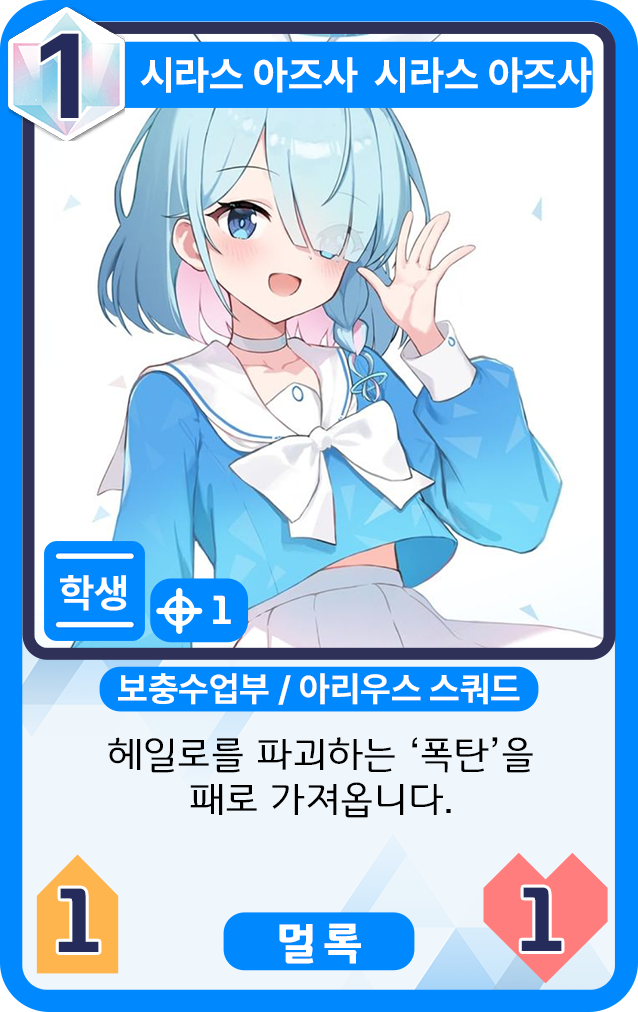
<style>
.page{position:relative;width:638px;height:1012px}
.page>*{position:absolute;margin:0}
.t1{font:119.3px "Pretendard-Bold";color:#252c5b}
.t2{font:39.8px "Pretendard-Bold";color:#ffffff}
.t3{font:39.8px "Pretendard-Bold";color:#fefefe}
.t4{font:39.8px "GyeonggiTitleVOTF";color:#fefefe}
.t5{font:34.8px "Pretendard-Bold";color:#ffffff}
.t6{font:39.8px/44.7px "GyeonggiTitleLOTF";color:#000000;scale:1.03 1}
.t7{font:89.5px "GyeonggiTitleVOTF";color:#252c5b}
.t8{font:45px "GyeonggiTitleVOTF";color:#ffffff}
</style>
<div class="page">
<p class="t1" style="left:40px;top:33px;width:39px;height:85px">1</p>
<p class="t2" style="left:140px;top:57px;width:218px;height:36px">시라스 아즈사</p>
<p class="t2" style="left:374px;top:57px;width:218px;height:36px">시라스 아즈사</p>
<p class="t3" style="left:60px;top:575px;width:67px;height:36px">학생</p>
<p class="t4" style="left:213px;top:595px;width:18px;height:29px">1</p>
<p class="t5" style="left:118px;top:673px;width:402px;height:32px">보충수업부 / 아리우스 스쿼드</p>
<p class="t6" style="left:108px;top:737px;width:425px;height:81px;text-align:center">헤일로를 파괴하는 ‘폭탄’을<br>패로 가져옵니다.</p>
<p class="t7" style="left:58px;top:888px;width:41px;height:64px">1</p>
<p class="t7" style="left:521px;top:887px;width:41px;height:64px">1</p>
<p class="t8" style="left:279px;top:923px;width:82px;height:41px">멀록</p>
</div>
